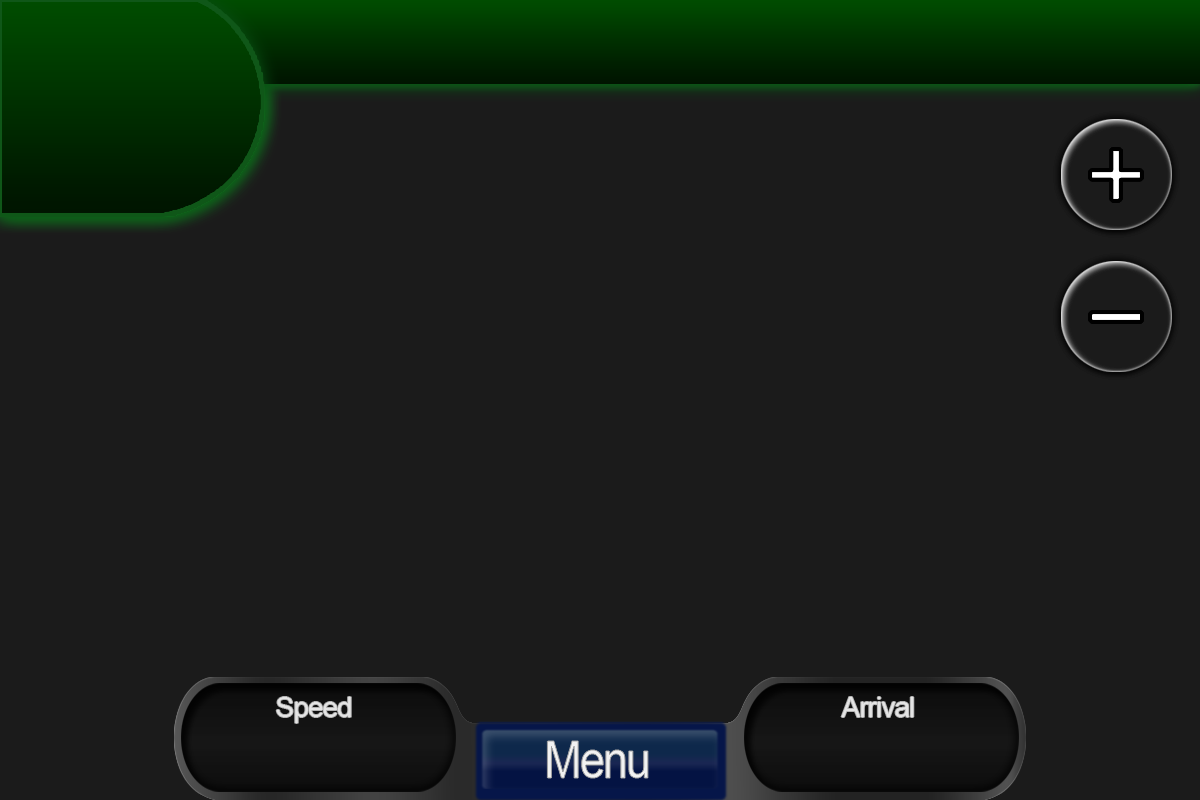
<style>
.page{position:relative;width:1200px;height:800px;background:#1b1b1b}
.page>*{position:absolute;margin:0}
.t1{font:27.9px "ArialMT";letter-spacing:-0.03em;color:#e4e4e4}
.t2{font:50.9px "ArialMT";letter-spacing:-0.045em;color:#f2f2f2;scale:0.88 1}
</style>
<div class="page">
<p class="t1" style="left:276px;top:697px;width:75px;height:26px">Speed</p>
<p class="t1" style="left:276px;top:697px;width:75px;height:26px">Speed</p>
<p class="t1" style="left:841px;top:697px;width:73px;height:20px">Arrival</p>
<p class="t1" style="left:841px;top:697px;width:73px;height:20px">Arrival</p>
<p class="t2" style="left:547px;top:741px;width:101px;height:37px">Menu</p>
<p class="t2" style="left:547px;top:741px;width:101px;height:37px">Menu</p>
</div>
